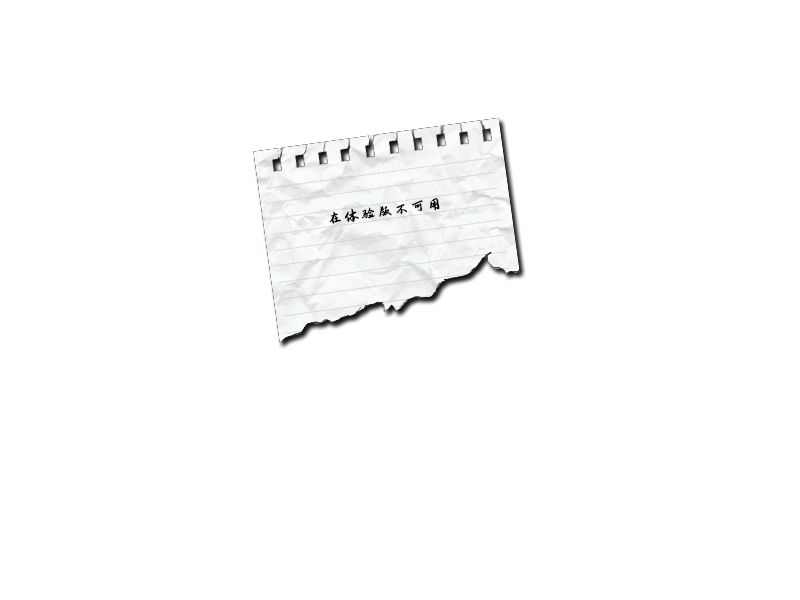
<style>
.page{position:relative;width:800px;height:600px;background:#ffffff}
.page>*{position:absolute;margin:0}
.t1{font:18.8px "slideyouran-Regular";color:#000000}
</style>
<div class="page">
<p class="t1" style="left:329px;top:197px;width:111px;height:27px;rotate:-8deg">在体验版不可用</p>
</div>
